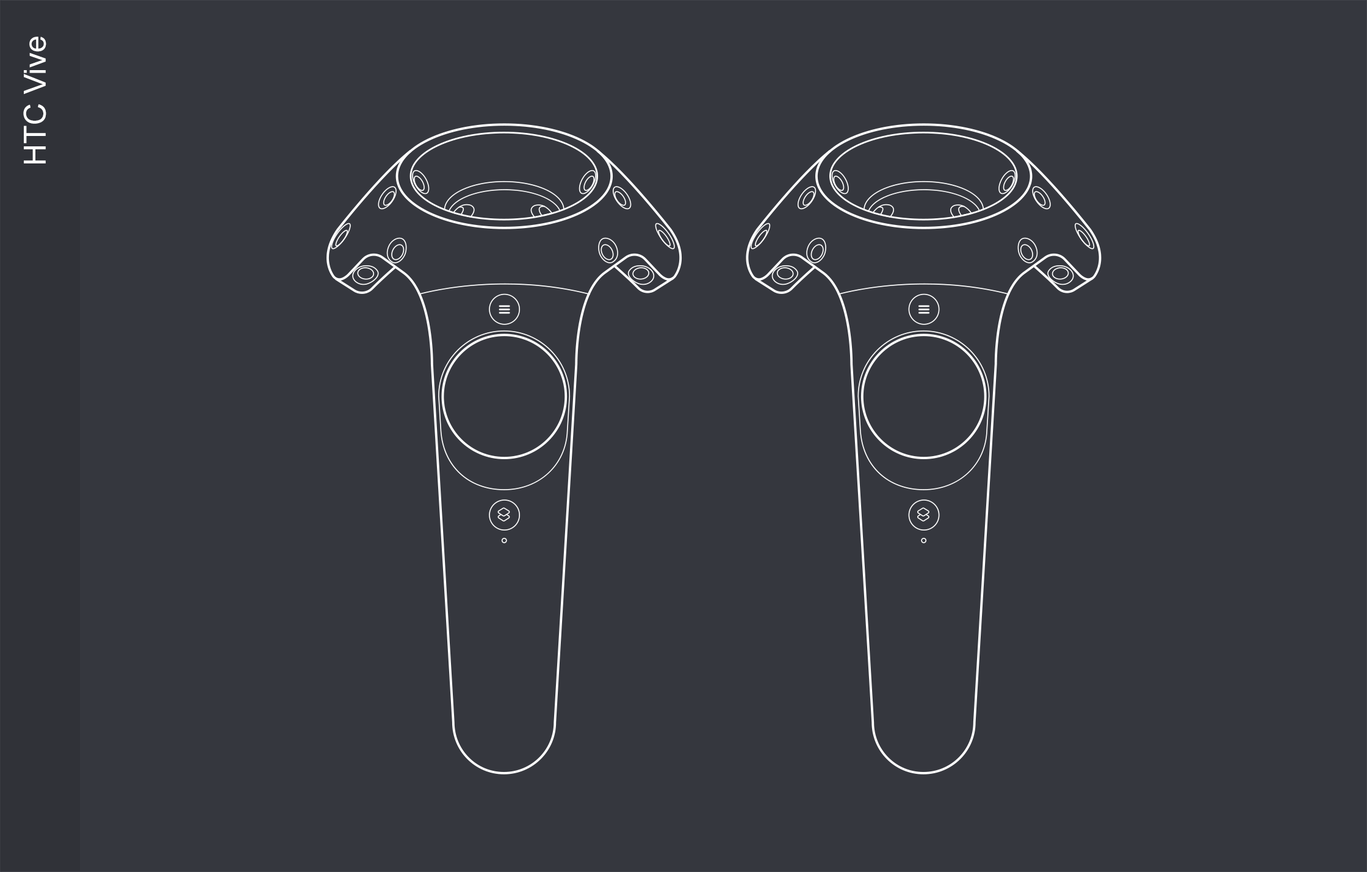
<style>
.page{position:relative;width:1367px;height:872px;background:#35373e}
.page>*{position:absolute;margin:0}
.t1{font:30.5px "ArialMT";color:#ffffff}
</style>
<div class="page">
<p class="t1" style="left:23px;top:37px;width:23px;height:127px;rotate:-90deg">HTC Vive</p>
</div>
